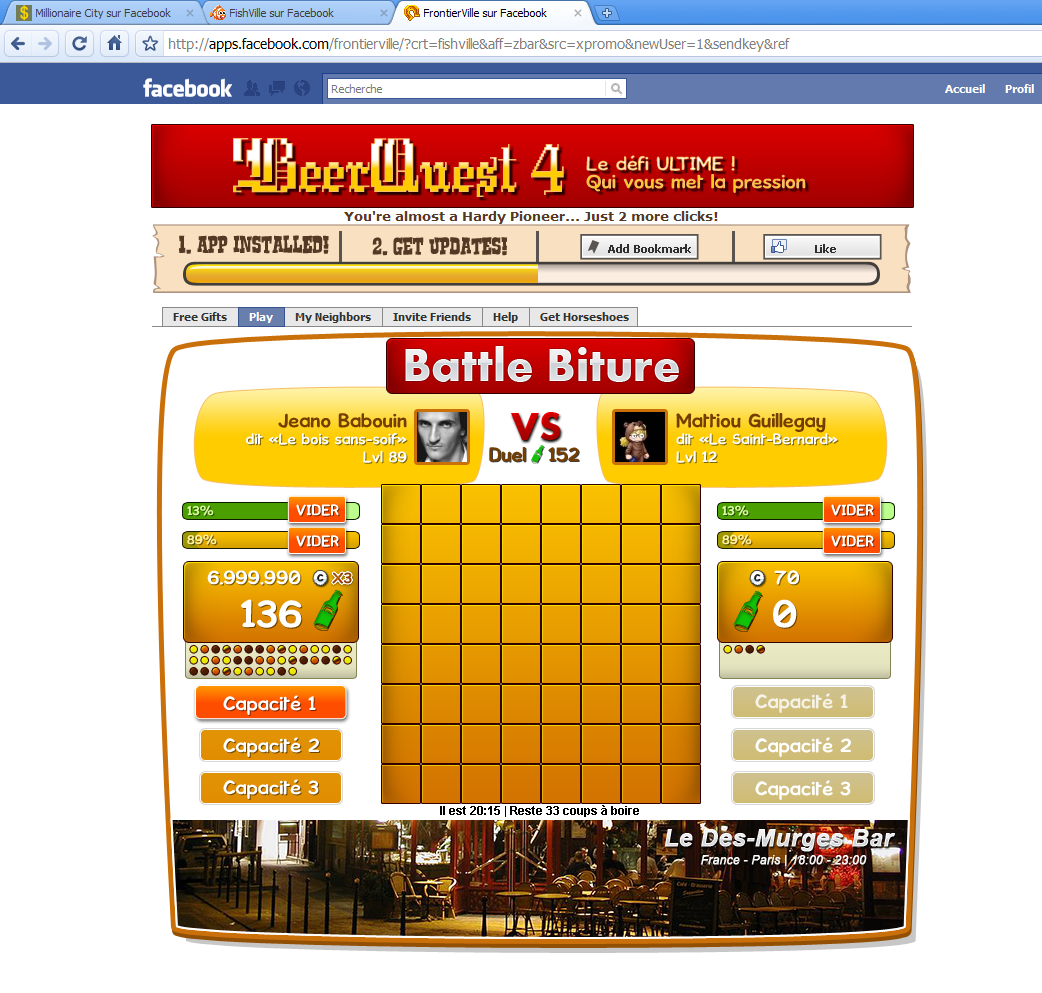
<style>
.page{position:relative;width:1042px;height:993px;background:#ffffff}
.page>*{position:absolute;margin:0}
.t1{font:60px "Argor-Cwar-Scaqh"}
.t2{font:18px/18px "Kronika"}
.t3{font:48px "Aharoni-Bold";color:#e2e3e6}
.t4{font:18px "Kronika";color:#753e00}
.t5{font:40px "Aharoni-Bold";color:#bc0000}
.t6{font:14px/18px "Kronika";color:#ffffff}
.t7{font:12px "Kronika";color:#d7fe9f}
.t8{font:14px "Kronika";color:#ffffff}
.t9{font:12px "Kronika";color:#fef19f}
.t10{font:18px "Kronika";color:#ffffff}
.t11{font:9px "Kronika";color:#272727;font-weight:bold}
.t12{font:14px "Kronika";color:#974003}
.t13{font:36px "Kronika";color:#ffffff}
.t14{font:18px "Kronika";color:#f5f2e6}
.t15{font:12px "Arial-BoldMT";color:#000000}
.t16{font:24px "Arial-BoldItalicMT";color:#ffffff;font-weight:bold}
.t17{font:12px "Arial-ItalicMT";color:#ffffff;font-weight:bold}
</style>
<div class="page">
<p class="t1" style="left:233px;top:138px;width:331px;height:59px">BeerQuest 4</p>
<p class="t2" style="left:586px;top:155px;width:220px;height:38px">Le défi ULTIME !<br>Qui vous met la pression</p>
<p class="t3" style="left:405px;top:346px;width:274px;height:36px">Battle Biture</p>
<p class="t4" style="left:278px;top:413px;width:129px;height:15px">Jeano Babouin</p>
<p class="t5" style="left:511px;top:412px;width:50px;height:28px">VS</p>
<p class="t4" style="left:676px;top:413px;width:150px;height:20px">Mattiou Guillegay</p>
<p class="t6" style="left:246px;top:433px;width:161px;height:30px;text-align:right">dit «Le bois sans-soif»<br>Lvl 89</p>
<p class="t6" style="left:676px;top:433px;width:162px;height:30px">dit «Le Saint-Bernard»<br>Lvl 12</p>
<p class="t4" style="left:489px;top:447px;width:90px;height:15px">Duel   152</p>
<p class="t7" style="left:187px;top:505px;width:27px;height:11px">13%</p>
<p class="t8" style="left:296px;top:504px;width:43px;height:12px">VIDER</p>
<p class="t7" style="left:722px;top:505px;width:27px;height:11px">13%</p>
<p class="t8" style="left:831px;top:504px;width:43px;height:12px">VIDER</p>
<p class="t9" style="left:187px;top:534px;width:30px;height:11px">89%</p>
<p class="t9" style="left:722px;top:534px;width:30px;height:11px">89%</p>
<p class="t8" style="left:296px;top:535px;width:43px;height:12px">VIDER</p>
<p class="t8" style="left:831px;top:535px;width:43px;height:12px">VIDER</p>
<p class="t10" style="left:207px;top:570px;width:94px;height:15px">6.999.990</p>
<p class="t11" style="left:317px;top:574px;width:7px;height:8px">C</p>
<p class="t12" style="left:332px;top:572px;width:20px;height:12px">X3</p>
<p class="t11" style="left:754px;top:574px;width:7px;height:8px">C</p>
<p class="t10" style="left:774px;top:570px;width:25px;height:15px">70</p>
<p class="t13" style="left:241px;top:599px;width:61px;height:29px">136</p>
<p class="t13" style="left:773px;top:599px;width:24px;height:29px">0</p>
<p class="t10" style="left:223px;top:695px;width:93px;height:20px">Capacité 1</p>
<p class="t14" style="left:755px;top:693px;width:93px;height:20px">Capacité 1</p>
<p class="t10" style="left:223px;top:737px;width:96px;height:20px">Capacité 2</p>
<p class="t10" style="left:755px;top:737px;width:96px;height:20px">Capacité 2</p>
<p class="t10" style="left:223px;top:779px;width:96px;height:20px">Capacité 3</p>
<p class="t10" style="left:755px;top:780px;width:96px;height:20px">Capacité 3</p>
<p class="t15" style="left:440px;top:805px;width:199px;height:12px">Il est 20:15 | Reste 33 coups à boire</p>
<p class="t16" style="left:665px;top:829px;width:230px;height:23px">Le Des-Murges Bar</p>
<p class="t17" style="left:701px;top:855px;width:166px;height:12px">France - Paris | 18:00 - 23:00</p>
</div>
